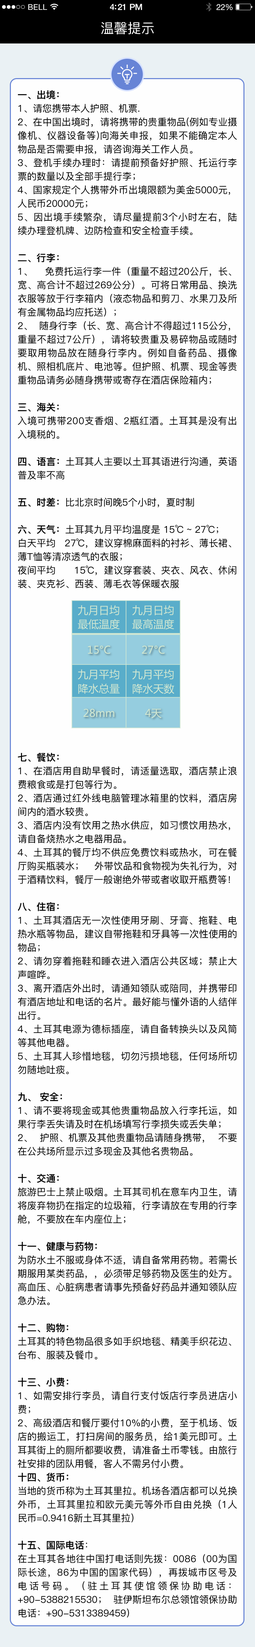
<style>
.page{position:relative;width:255px;height:1647px;background:#fefefe}
.page>*{position:absolute;margin:0}
.t1{font:7.8px "HelveticaNeue";letter-spacing:0.02em;color:#ffffff}
.t2{font:8.5px "HelveticaNeue-Medium";letter-spacing:-0.02em;color:#ffffff}
.t3{font:8.2px "HelveticaNeue";letter-spacing:-0.02em;color:#ffffff}
.t4{font:13.6px "PingFang-SC-Regular";color:#ffffff}
.t5{font:9.5px/13.6px "PingFang-SC-Regular";color:#000000}
.t6{font:9.5px/13.6px "PingFang-SC-Semibold";color:#000000}
</style>
<div class="page">
<p class="t1" style="left:28px;top:4px;width:19px;height:6px">BELL</p>
<p class="t2" style="left:110px;top:4px;width:32px;height:6px">4:21 PM</p>
<p class="t3" style="left:216px;top:4px;width:16px;height:6px">22%</p>
<p class="t4" style="left:101px;top:22px;width:53px;height:13px">温馨提示</p>
<p class="t5" style="left:18px;top:90px;width:219px;height:498px;text-align:justify"><span class="t6">一、出境：<br></span>1、请您携带本人护照、机票.<br>2、在中国出境时，请将携带的贵重物品(例如专业摄像机、仪器设备等)向海关申报，如果不能确定本人  物品是否需要申报，请咨询海关工作人员。<br>3、登机手续办理时：请提前预备好护照、托运行李票的数量以及全部手提行李；<br>4、国家规定个人携带外币出境限额为美金5000元，人民币20000元；<br>5、因出境手续繁杂，请尽量提前3个小时左右，陆续办理登机牌、边防检查和安全检查手续。<br><br><span class="t6">二、行李：<br></span>1、 免费托运行李一件（重量不超过20公斤，长、宽、高合计不超过269公分）。可将日常用品、换洗衣服等放于行李箱内（液态物品和剪刀、水果刀及所有金属物品均应托送）；<br>2、 随身行李（长、宽、高合计不得超过115公分，重量不超过7公斤），请将较贵重及易碎物品或随时要取用物品放在随身行李内。例如自备药品、摄像机、照相机底片、电池等。但护照、机票、现金等贵重物品请务必随身携带或寄存在酒店保险箱内；<br><br><span class="t6">三、海关：<br></span>入境可携带200支香烟、2瓶红酒。土耳其是没有出入境税的。<br><br><span class="t6">四、语言：</span>土耳其人主要以土耳其语进行沟通，英语普及率不高<br><br><span class="t6">五、时差：</span>比北京时间晚5个小时，夏时制<br><br><span class="t6">六、天气：</span>土耳其九月平均温度是 15℃ ~ 27℃；<br>白天平均 27℃，建议穿棉麻面料的衬衫、薄长裙、薄T恤等清凉透气的衣服；<br>夜间平均 15℃，建议穿套装、夹衣、风衣、休闲装、夹克衫、西装、薄毛衣等保暖衣服</p>
<p class="t5" style="left:18px;top:753px;width:219px;height:865px;text-align:justify"><span class="t6">七、餐饮：<br></span>1、在酒店用自助早餐时，请适量选取，酒店禁止浪费粮食或是打包等行为。<br>2、酒店通过红外线电脑管理冰箱里的饮料，酒店房间内的酒水较贵。<br>3、酒店内没有饮用之热水供应，如习惯饮用热水，请自备烧热水之电器用品。<br>4、土耳其的餐厅均不供应免费饮料或热水，可在餐厅购买瓶装水； 外带饮品和食物视为失礼行为，对于酒精饮料，餐厅一般谢绝外带或者收取开瓶费等！ <br><br><span class="t6">八、住宿：<br></span>1、土耳其酒店无一次性使用牙刷、牙膏、拖鞋、电热水瓶等物品，建议自带拖鞋和牙具等一次性使用的物品；<br>2、请勿穿着拖鞋和睡衣进入酒店公共区域；禁止大声喧哗。<br>3、离开酒店外出时，请通知领队或陪同，并携带印有酒店地址和电话的名片。最好能与懂外语的人结伴出行。<br>4、土耳其电源为德标插座，请自备转换头以及风筒等其他电器。<br>5、土耳其人珍惜地毯，切勿污损地毯，任何场所切勿随地吐痰。<br><br><span class="t6">九、 安全：<br></span>1、请不要将现金或其他贵重物品放入行李托运，如果行李丢失请及时在机场填写行李损失或丢失单；<br>2、 护照、机票及其他贵重物品请随身携带， 不要在公共场所显示过多现金及其他名贵物品。<br><br><span class="t6">十、交通：<br></span>旅游巴士上禁止吸烟。土耳其司机在意车内卫生，请将废弃物扔在指定的垃圾箱，行李请放在专用的行李舱，不要放在车内座位上；<br><br><span class="t6">十一、健康与药物：<br></span>为防水土不服或身体不适，请自备常用药物。若需长期服用某类药品，，必须带足够药物及医生的处方。高血压、心脏病患者请事先预备好药品并通知领队应急办法。<br><br><span class="t6">十二、购物：<br></span>土耳其的特色物品很多如手织地毯、精美手织花边、台布、服装及餐巾。<br><br><span class="t6">十三、小费：<br></span>1、如需安排行李员，请自行支付饭店行李员进店小费；<br>2、高级酒店和餐厅要付10%的小费，至于机场、饭店的搬运工，打扫房间的服务员，给1美元即可。土耳其街上的厕所都要收费，请准备土币零钱。由旅行社安排的团队用餐，客人不需另付小费。<br><span class="t6">十四、货币：<br></span>当地的货币称为土耳其里拉。机场各酒店都可以兑换外币，土耳其里拉和欧元美元等外币自由兑换（1人民币=0.9416新土耳其里拉）<br><br><span class="t6">十五、国际电话</span>：<br>在土耳其各地往中国打电话则先拨：0086（00为国际长途，86为中国的国家代码），再拨城市区号及电话号码。（驻土耳其使馆领保协助电话：+90-5388215530； 驻伊斯坦布尔总领馆领保协助电话：+90-5313389459）</p>
</div>
